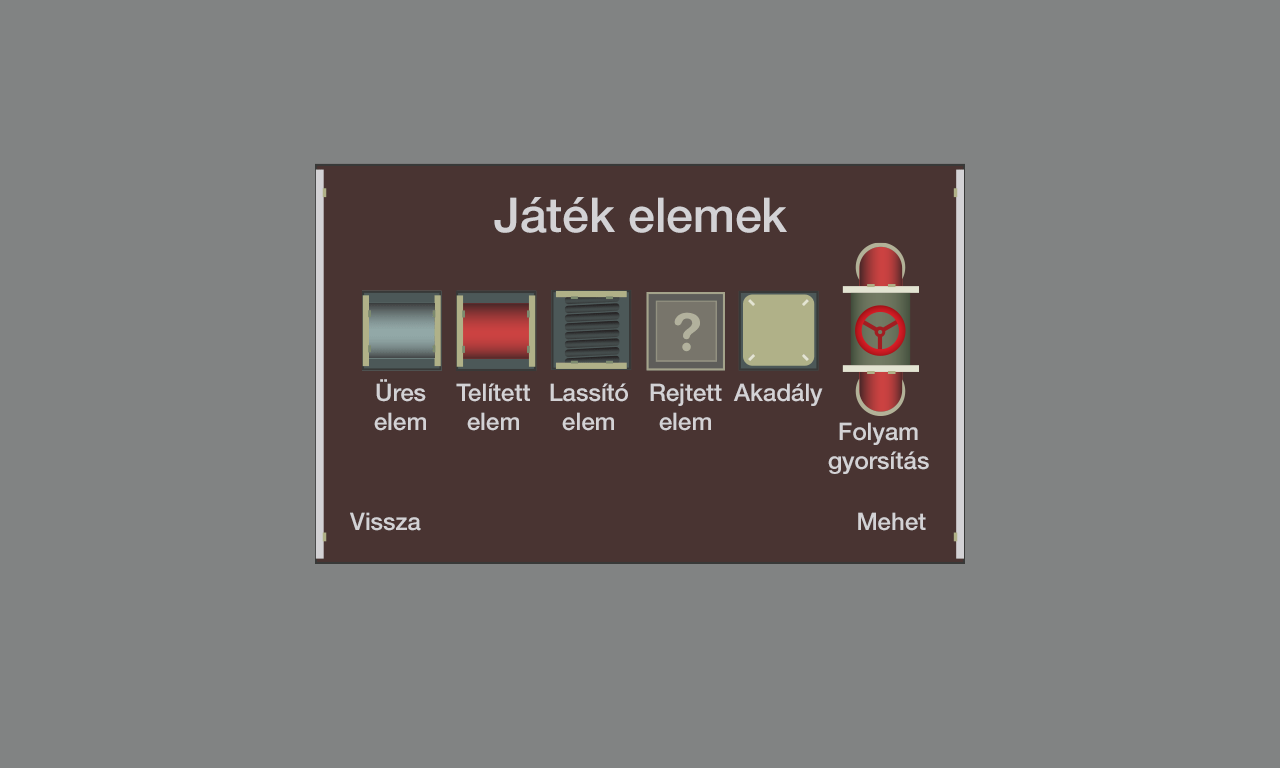
<style>
.page{position:relative;width:1280px;height:768px;background:#818383}
.page>*{position:absolute;margin:0}
.t1{font:48px "HelveticaNeueLTPro-Md";color:#d3d2d5}
.t2{font:24px "HelveticaNeueLTPro-Md";color:#d3d2d5}
</style>
<div class="page">
<p class="t1" style="left:494px;top:197px;width:293px;height:36px">Játék elemek</p>
<p class="t2" style="left:374px;top:379px;width:52px;height:52px;text-align:center">Üres<br>elem</p>
<p class="t2" style="left:456px;top:383px;width:74px;height:48px;text-align:center">Telített<br>elem</p>
<p class="t2" style="left:550px;top:383px;width:78px;height:48px;text-align:center">Lassító<br>elem</p>
<p class="t2" style="left:650px;top:383px;width:72px;height:48px;text-align:center">Rejtett<br>elem</p>
<p class="t2" style="left:733px;top:383px;width:90px;height:23px">Akadály</p>
<p class="t2" style="left:828px;top:422px;width:101px;height:52px;text-align:center">Folyam<br>gyorsítás</p>
<p class="t2" style="left:350px;top:512px;width:71px;height:19px">Vissza</p>
<p class="t2" style="left:858px;top:512px;width:68px;height:19px">Mehet</p>
</div>
